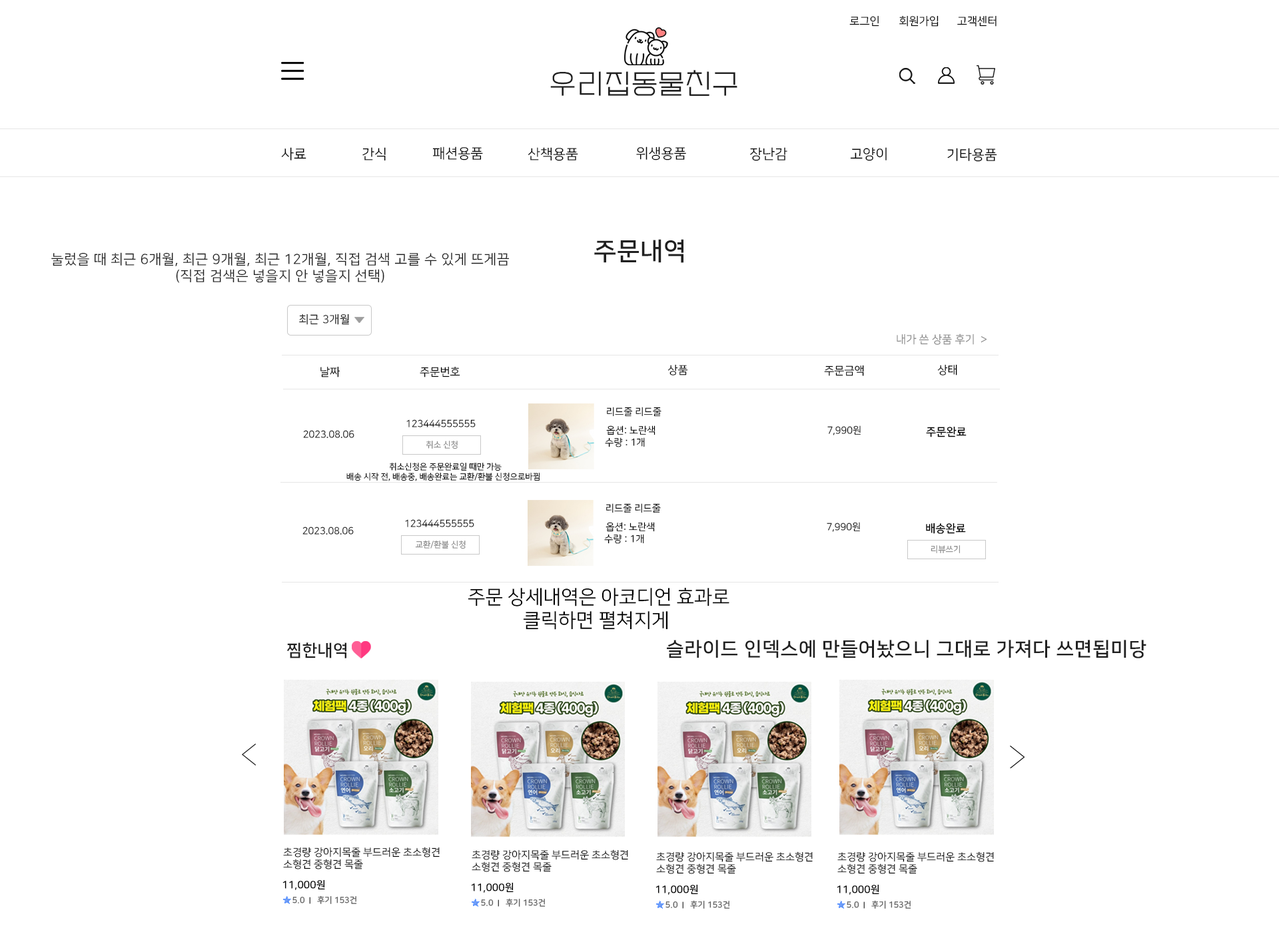
<style>
.page{position:relative;width:1279px;height:932px;background:#ffffff}
.page>*{position:absolute;margin:0}
.t1{font:11.1px "NanumSquareR";color:#000000}
.t2{font:27.8px "EF_watermelonSalad";letter-spacing:0.025em;color:#202020}
.t3{font:13.9px "NanumSquareR";color:#000000}
.t4{font:25px "NanumSquareB";letter-spacing:0.025em;color:#202020}
.t5{font:13.9px "NanumSquareR";letter-spacing:0.025em;color:#202020}
.t6{font:11.1px "NanumSquareR";letter-spacing:0.025em;color:#202020}
.t7{font:11.1px "NanumSquareR";color:#898989}
.t8{font:9.7px "NanumSquareR";color:#000000}
.t9{font:11.1px "NanumSquareB";color:#000000}
.t10{font:8.3px "NanumSquareR";color:#898989}
.t11{font:8.3px "NanumSquareR";color:#000000}
.t12{font:19.4px "NanumSquareR";color:#000000}
.t13{font:19.4px "NanumSquareB";letter-spacing:0.025em;color:#202020}
.t14{font:16.7px "NanumSquareB";letter-spacing:0.025em;color:#202020}
.t15{font:10.3px "NanumSquareR";color:#000000}
.t16{font:10.3px "NanumSquareB";color:#000000}
.t17{font:8.3px "NanumSquareB";color:#636363}
.t18{font:6.9px "NanumSquareB"}
</style>
<div class="page">
<p class="t1" style="left:849px;top:15px;width:30px;height:12px">로그인</p>
<p class="t1" style="left:899px;top:15px;width:39px;height:12px">회원가입</p>
<p class="t1" style="left:957px;top:15px;width:39px;height:12px">고객센터</p>
<p class="t2" style="left:550px;top:70px;width:187px;height:26px">우리집동물친구</p>
<p class="t3" style="left:281px;top:147px;width:25px;height:14px">사료</p>
<p class="t3" style="left:362px;top:147px;width:24px;height:14px">간식</p>
<p class="t3" style="left:432px;top:147px;width:51px;height:14px">패션용품</p>
<p class="t3" style="left:528px;top:147px;width:50px;height:14px">산책용품</p>
<p class="t3" style="left:636px;top:147px;width:50px;height:14px">위생용품</p>
<p class="t3" style="left:750px;top:147px;width:37px;height:14px">장난감</p>
<p class="t3" style="left:850px;top:147px;width:37px;height:14px">고양이</p>
<p class="t3" style="left:947px;top:148px;width:50px;height:14px">기타용품</p>
<p class="t4" style="left:594px;top:239px;width:89px;height:24px">주문내역</p>
<p class="t5" style="left:51px;top:252px;width:459px;height:31px;text-align:center">눌렀을 때 최근 6개월, 최근 9개월, 최근 12개월, 직접 검색 고를 수 있게 뜨게끔<br>(직접 검색은 넣을지 안 넣을지 선택)</p>
<p class="t6" style="left:299px;top:314px;width:50px;height:11px">최근 3개월</p>
<p class="t7" style="left:896px;top:334px;width:91px;height:11px">내가 쓴 상품 후기  &gt;</p>
<p class="t1" style="left:667px;top:364px;width:21px;height:12px">상품</p>
<p class="t1" style="left:824px;top:365px;width:40px;height:11px">주문금액</p>
<p class="t1" style="left:937px;top:364px;width:20px;height:12px">상태</p>
<p class="t1" style="left:320px;top:366px;width:20px;height:12px">날짜</p>
<p class="t1" style="left:420px;top:366px;width:40px;height:12px">주문번호</p>
<p class="t8" style="left:607px;top:407px;width:54px;height:10px">리드줄 리드줄</p>
<p class="t8" style="left:406px;top:420px;width:70px;height:8px">123444555555</p>
<p class="t8" style="left:605px;top:426px;width:50px;height:22px;text-align:center">옵션: 노란색<br>수량 : 1개</p>
<p class="t8" style="left:827px;top:426px;width:34px;height:10px">7,990원</p>
<p class="t8" style="left:303px;top:430px;width:51px;height:8px">2023.08.06</p>
<p class="t9" style="left:926px;top:426px;width:40px;height:12px">주문완료</p>
<p class="t10" style="left:426px;top:441px;width:32px;height:9px">취소 신청</p>
<p class="t11" style="left:346px;top:463px;width:193px;height:19px;text-align:center">취소신청은 주문완료일 때만 가능<br>배송 시작 전, 배송중, 배송완료는 교환/환불 신청으로바뀜</p>
<p class="t8" style="left:606px;top:504px;width:55px;height:10px">리드줄 리드줄</p>
<p class="t8" style="left:405px;top:520px;width:69px;height:8px">123444555555</p>
<p class="t8" style="left:302px;top:527px;width:52px;height:8px">2023.08.06</p>
<p class="t8" style="left:604px;top:522px;width:51px;height:22px;text-align:center">옵션: 노란색<br>수량 : 1개</p>
<p class="t8" style="left:827px;top:522px;width:33px;height:10px">7,990원</p>
<p class="t9" style="left:926px;top:523px;width:40px;height:11px">배송완료</p>
<p class="t10" style="left:415px;top:541px;width:51px;height:8px">교환/환불 신청</p>
<p class="t10" style="left:930px;top:545px;width:30px;height:8px">리뷰쓰기</p>
<p class="t12" style="left:468px;top:587px;width:261px;height:43px;text-align:center">주문 상세내역은 아코디언 효과로<br>클릭하면 펼쳐지게</p>
<p class="t13" style="left:667px;top:640px;width:479px;height:19px">슬라이드 인덱스에 만들어놨으니 그대로 가져다 쓰면됩미당</p>
<p class="t14" style="left:286px;top:643px;width:60px;height:16px">찜한내역</p>
<p class="t15" style="left:283px;top:847px;width:157px;height:23px">초경량 강아지목줄 부드러운 초소형견 <br>소형견 중형견 목줄</p>
<p class="t15" style="left:472px;top:850px;width:156px;height:23px">초경량 강아지목줄 부드러운 초소형견 <br>소형견 중형견 목줄</p>
<p class="t15" style="left:656px;top:852px;width:157px;height:23px">초경량 강아지목줄 부드러운 초소형견 <br>소형견 중형견 목줄</p>
<p class="t15" style="left:837px;top:852px;width:157px;height:23px">초경량 강아지목줄 부드러운 초소형견 <br>소형견 중형견 목줄</p>
<p class="t16" style="left:282px;top:880px;width:43px;height:10px">11,000원</p>
<p class="t16" style="left:471px;top:883px;width:43px;height:10px">11,000원</p>
<p class="t16" style="left:655px;top:885px;width:43px;height:10px">11,000원</p>
<p class="t16" style="left:837px;top:885px;width:42px;height:10px">11,000원</p>
<p class="t17" style="left:292px;top:897px;width:13px;height:7px">5.0</p>
<p class="t18" style="left:309px;top:897px;width:1px;height:7px">ㅣ</p>
<p class="t17" style="left:317px;top:896px;width:40px;height:8px">후기 153건</p>
<p class="t17" style="left:481px;top:900px;width:13px;height:6px">5.0</p>
<p class="t18" style="left:498px;top:900px;width:1px;height:7px">ㅣ</p>
<p class="t17" style="left:506px;top:898px;width:39px;height:9px">후기 153건</p>
<p class="t17" style="left:665px;top:902px;width:13px;height:6px">5.0</p>
<p class="t18" style="left:682px;top:902px;width:1px;height:7px">ㅣ</p>
<p class="t17" style="left:690px;top:900px;width:40px;height:9px">후기 153건</p>
<p class="t17" style="left:847px;top:902px;width:12px;height:6px">5.0</p>
<p class="t18" style="left:863px;top:902px;width:2px;height:7px">ㅣ</p>
<p class="t17" style="left:871px;top:900px;width:40px;height:9px">후기 153건</p>
</div>
